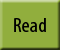
<style>
.page{position:relative;width:60px;height:50px;background:#91ae3d}
.page>*{position:absolute;margin:0}
.t1{font:20.8px "MyriadPro-Cond";letter-spacing:0.025em;color:#000000}
</style>
<div class="page">
<p class="t1" style="left:14px;top:18px;width:32px;height:14px">Read</p>
</div>
